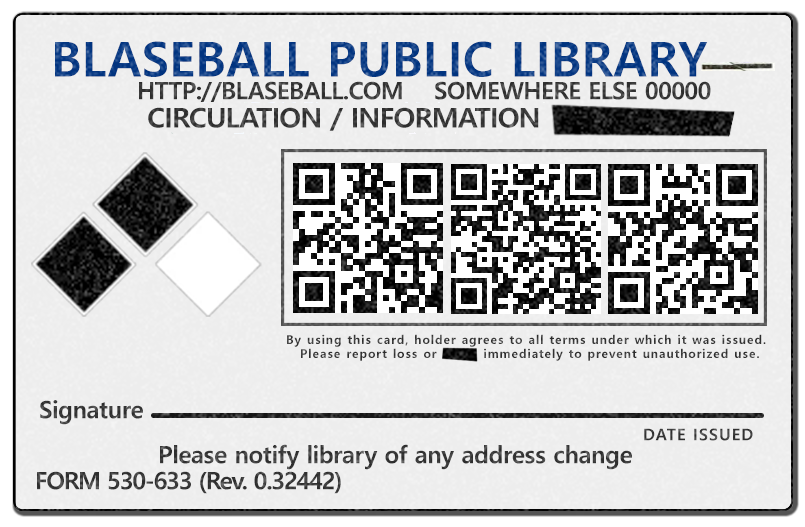
<style>
.page{position:relative;width:805px;height:527px}
.page>*{position:absolute;margin:0}
.t1{font:48px "MalgunGothicBold";letter-spacing:0.005em;color:#00337f}
.t2{font:24px "MalgunGothicBold";letter-spacing:-0.03em;color:#3c3c3c}
.t3{font:27px "MalgunGothicBold";letter-spacing:-0.04em;color:#3a3a3a;scale:1.05 1}
.t4{font:12px "MalgunGothicBold";letter-spacing:0.075em;color:#3d3d3d}
.t5{font:12px "MalgunGothicBold";letter-spacing:0.075em;color:#3b3b3b}
.t6{font:24px "MalgunGothicBold";letter-spacing:-0.023em;color:#3c3c3c}
.t7{font:16px "MalgunGothicBold";letter-spacing:0.06em;color:#3b3b3b}
.t8{font:24px "MalgunGothicBold";letter-spacing:-0.054em;color:#3a3a3a}
</style>
<div class="page">
<p class="t1" style="left:55px;top:41px;width:653px;height:36px">BLASEBALL PUBLIC LIBRARY</p>
<p class="t2" style="left:139px;top:81px;width:572px;height:21px">HTTP://BLASEBALL.COM    SOMEWHERE ELSE 00000</p>
<p class="t3" style="left:148px;top:107px;width:391px;height:24px">CIRCULATION / INFORMATION</p>
<p class="t4" style="left:287px;top:334px;width:479px;height:13px">By using this card, holder agrees to all terms under which it was issued.</p>
<p class="t5" style="left:301px;top:348px;width:458px;height:13px">Please report loss or         immediately to prevent unauthorized use.</p>
<p class="t6" style="left:40px;top:400px;width:103px;height:25px">Signature</p>
<p class="t7" style="left:644px;top:428px;width:109px;height:13px">DATE ISSUED</p>
<p class="t6" style="left:160px;top:444px;width:472px;height:26px">Please notify library of any address change</p>
<p class="t8" style="left:37px;top:471px;width:304px;height:23px">FORM 530-633 (Rev. 0.32442)</p>
</div>
